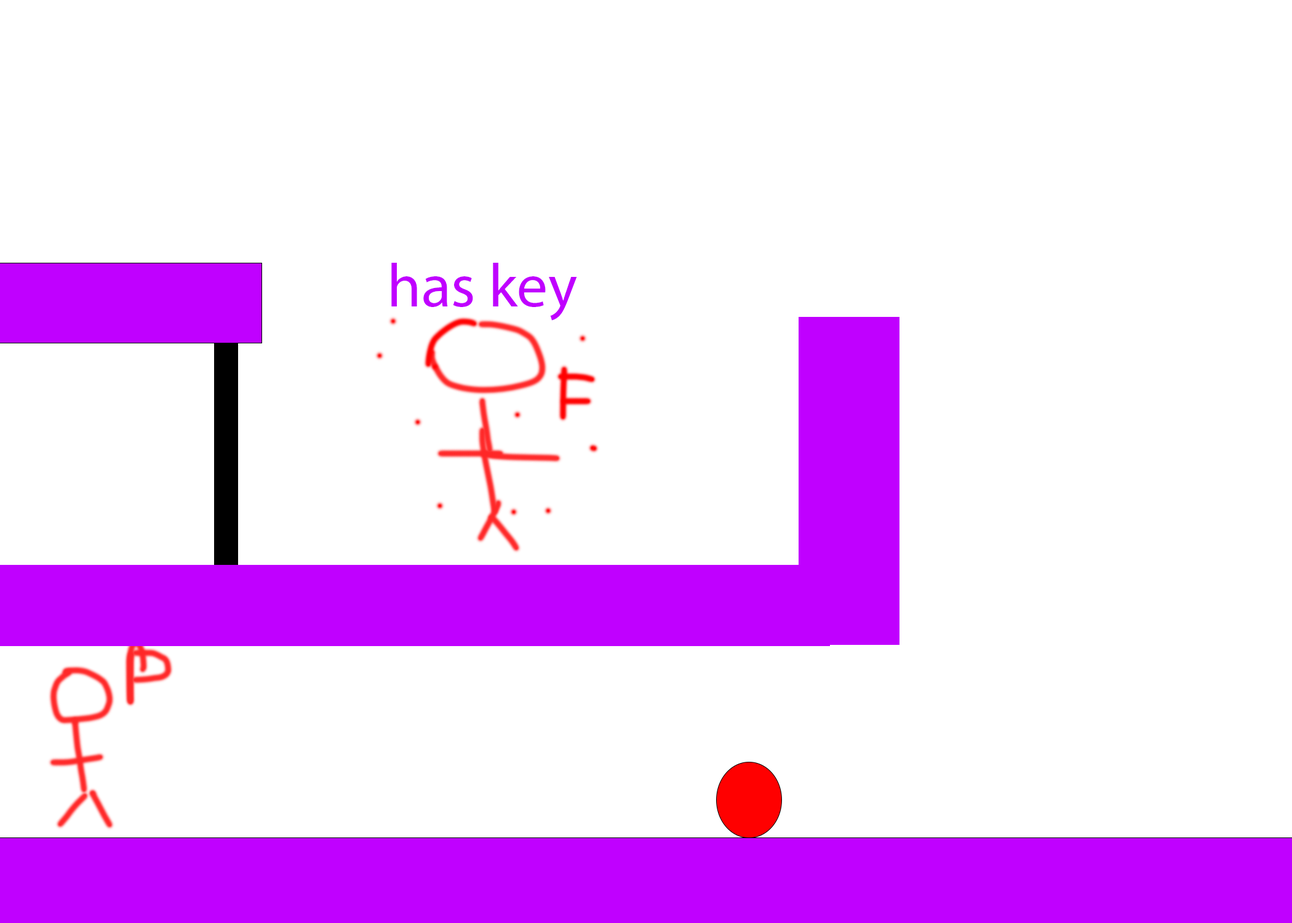
<style>
.page{position:relative;width:1292px;height:923px;background:#ffffff}
.page>*{position:absolute;margin:0}
.t1{font:61.5px "MyriadPro-Regular";color:#c000ff}
</style>
<div class="page">
<p class="t1" style="left:391px;top:263px;width:186px;height:58px">has key</p>
</div>
